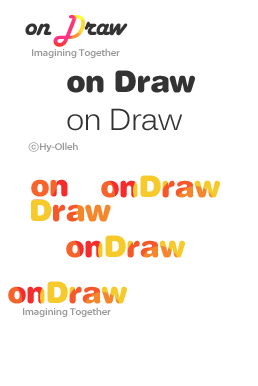
<style>
.page{position:relative;width:258px;height:386px;background:#ffffff}
.page>*{position:absolute;margin:0}
.t1{font:30px "HarlowSolid";letter-spacing:-0.025em;color:#333333}
.t2{font:10px "MyriadPro-SemiboldSemiExt";letter-spacing:-0.025em;color:#999999}
.t3{font:30px "HelveticaRounded-Black";letter-spacing:-0.025em;color:#333333}
.t4{font:30px "Kalinga";letter-spacing:-0.025em;color:#333333}
.t5{font:10px "RixMGoEB";color:#999999;scale:1.2 1}
.t6{font:30px "HelveticaRounded-Black";letter-spacing:-0.025em}
</style>
<div class="page">
<p class="t1" style="left:25px;top:15px;width:103px;height:32px">on Draw</p>
<p class="t2" style="left:32px;top:48px;width:88px;height:10px">Imagining Together</p>
<p class="t3" style="left:67px;top:70px;width:128px;height:23px">on Draw</p>
<p class="t4" style="left:67px;top:108px;width:116px;height:23px">on Draw</p>
<p class="t2" style="left:28px;top:142px;width:50px;height:10px"><span class="t5">ⓒ</span>Hy-Olleh</p>
<p class="t6" style="left:66px;top:235px;width:119px;height:23px">onDraw</p>
<p class="t2" style="left:23px;top:307px;width:88px;height:10px">Imagining Together</p>
</div>
